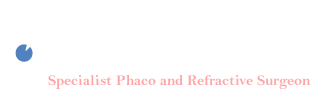
<style>
.page{position:relative;width:320px;height:100px;background:#ffffff}
.page>*{position:absolute;margin:0}
.t1{font:15px/20px "BellMTBold";color:#fea5a5}
.t2{font:34px/24px "BellMTBold";color:#ffffff}
.t3{font:16px/24px "BellMTBold";color:#ffffff}
</style>
<div class="page">
<p class="t1" style="left:48px;top:18px;width:263px;height:71px"><span class="t2">Dr. Umashankar<br></span><span class="t3">M.B.B.S., M.S., D.N.B., F.R.C.S.,<br></span>Specialist Phaco and Refractive Surgeon</p>
</div>
